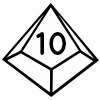
<style>
.page{position:relative;width:100px;height:100px;background:#ffffff}
.page>*{position:absolute;margin:0}
.t1{font:33.2px "QuicksandBold-Regular";color:#000000}
</style>
<div class="page">
<p class="t1" style="left:36px;top:32px;width:30px;height:23px">10</p>
</div>
